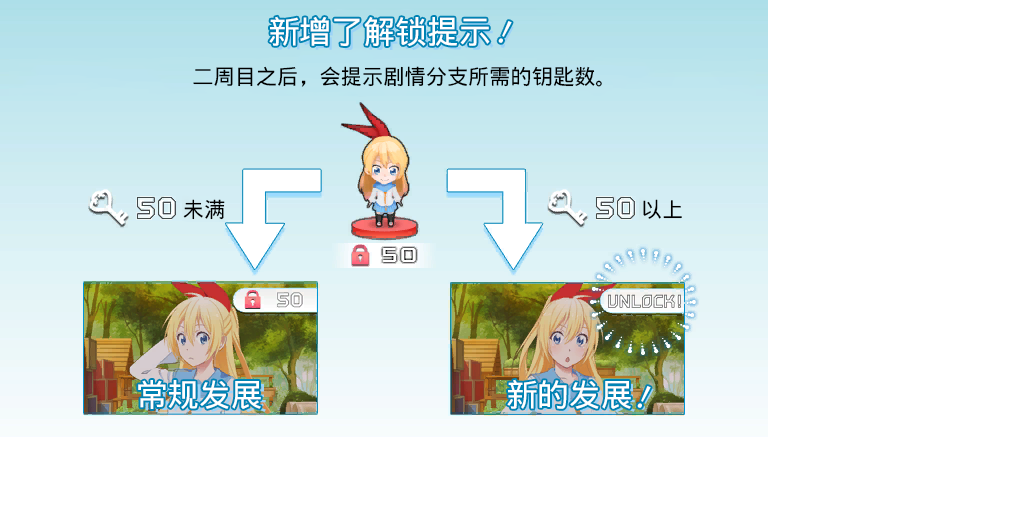
<style>
.page{position:relative;width:1024px;height:512px;background:#ffffff}
.page>*{position:absolute;margin:0}
.t1{font:32px "WenQuanYiMicroHeiMono";letter-spacing:-0.005em;color:#ffffff}
.t2{font:21.3px "WenQuanYiMicroHeiMono";letter-spacing:-0.005em;color:#000000}
.t3{font:32px "WenQuanYiMicroHeiMono";letter-spacing:-0.005em}
</style>
<div class="page">
<p class="t1" style="left:269px;top:16px;width:221px;height:30px">新增了解锁提示</p>
<p class="t1" style="left:498px;top:21px;width:14px;height:22px;rotate:26deg">!</p>
<p class="t2" style="left:193px;top:66px;width:409px;height:21px">二周目之后，会提示剧情分支所需的钥匙数。</p>
<p class="t2" style="left:183px;top:199px;width:42px;height:21px">未满</p>
<p class="t2" style="left:643px;top:199px;width:39px;height:20px">以上</p>
<p class="t1" style="left:138px;top:380px;width:123px;height:29px">常规发展</p>
<p class="t1" style="left:507px;top:379px;width:124px;height:30px">新的发展</p>
<p class="t1" style="left:637px;top:386px;width:14px;height:22px;rotate:26deg">!</p>
<p class="t3" style="left:640px;top:388px;width:14px;height:22px;rotate:26deg">!</p>
</div>
